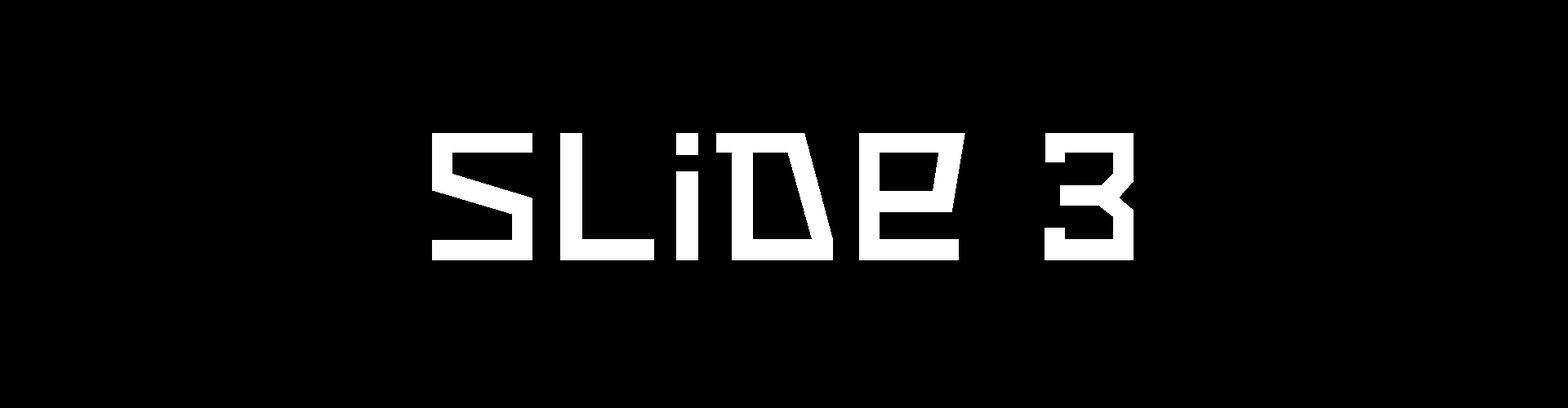
<style>
.page{position:relative;width:1568px;height:408px;background:#000000}
.page>*{position:absolute;margin:0}
.t1{font:159.3px "RedOctoberLight";color:#ffffff}
</style>
<div class="page">
<p class="t1" style="left:432px;top:133px;width:702px;height:128px">slide 3</p>
</div>
